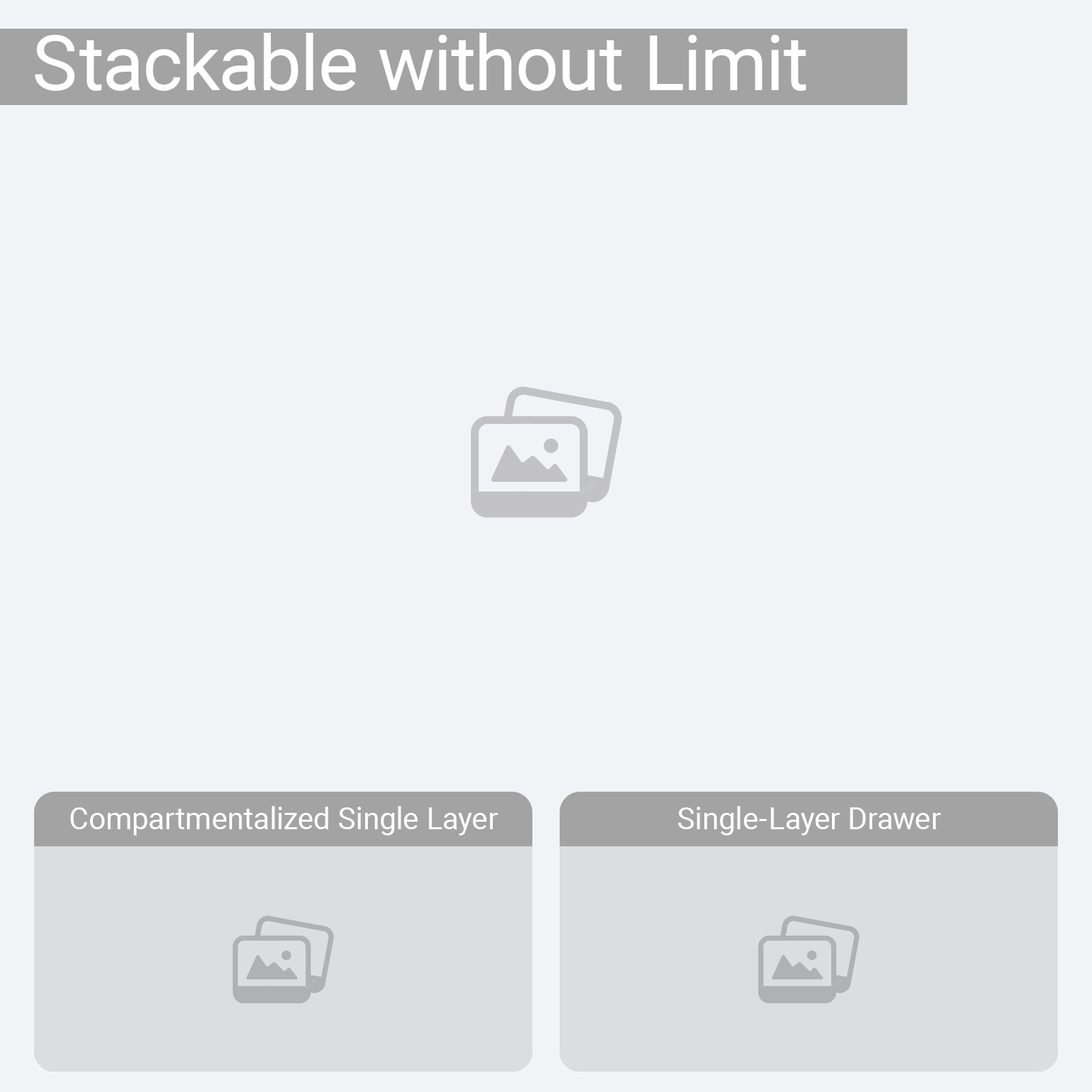
<style>
.page{position:relative;width:1092px;height:1092px;background:#f2f3f6}
.page>*{position:absolute;margin:0}
.t1{font:76.4px "Roboto-Regular";color:#ffffff}
.t2{font:30px "Roboto-Regular";color:#ffffff}
</style>
<div class="page">
<p class="t1" style="left:35px;top:33px;width:771px;height:58px">Stackable without Limit</p>
<p class="t2" style="left:70px;top:806px;width:428px;height:29px">Compartmentalized Single Layer</p>
<p class="t2" style="left:678px;top:806px;width:263px;height:29px">Single-Layer Drawer</p>
</div>
